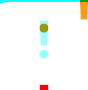
<style>
.page{position:relative;width:88px;height:90px;background:#ffffff}
.page>*{position:absolute;margin:0}
.t1{font:52px "OpenSans-Bold"}
</style>
<div class="page">
<p class="t1" style="left:39px;top:18px;width:10px;height:39px">!</p>
</div>
